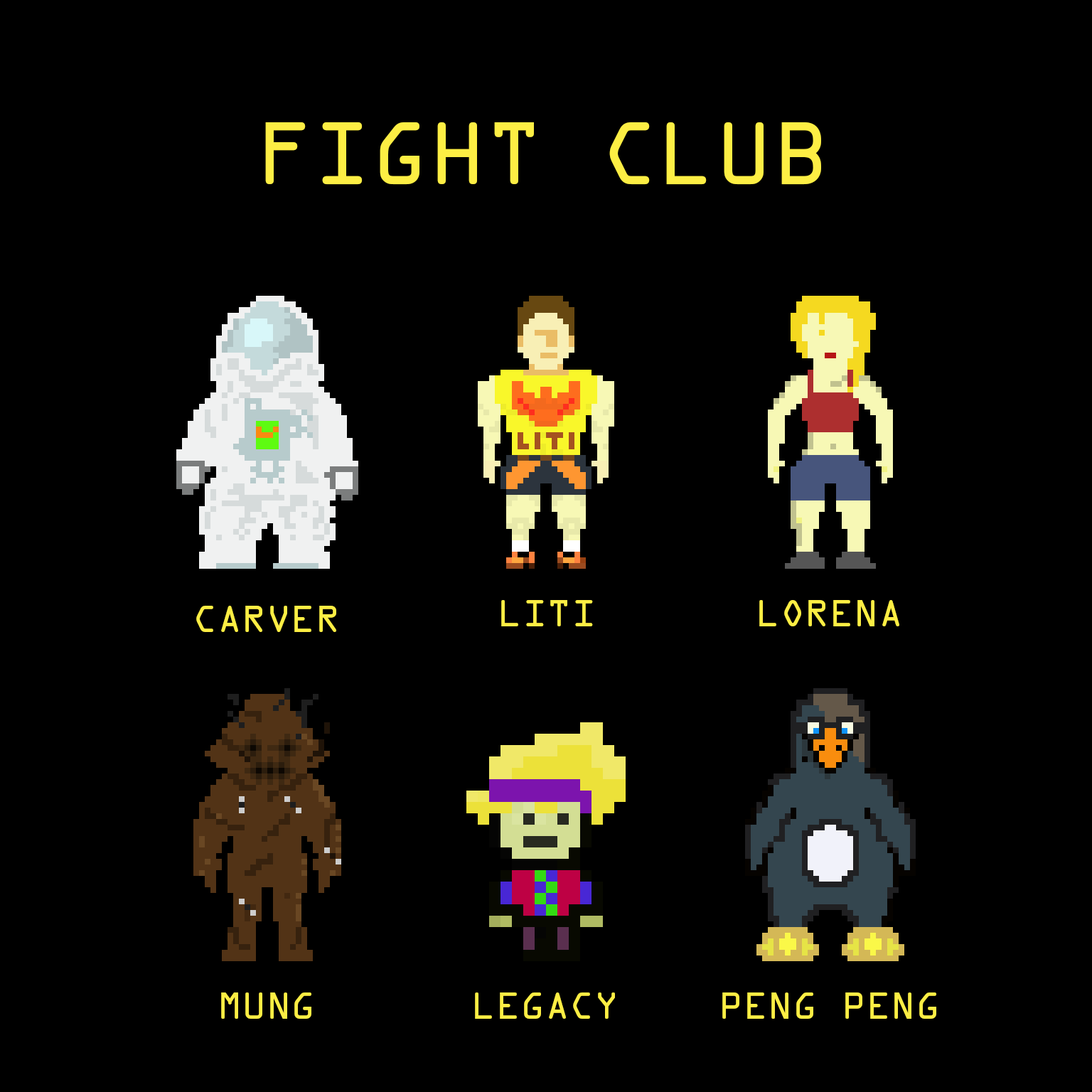
<style>
.page{position:relative;width:1092px;height:1092px;background:#000000}
.page>*{position:absolute;margin:0}
.t1{font:79.6px "OCRAStd";color:#fdee44}
.t2{font:34.1px "OCRAStd";color:#fdee44}
</style>
<div class="page">
<p class="t1" style="left:265px;top:122px;width:556px;height:63px">FIGHT CLUB</p>
<p class="t2" style="left:196px;top:606px;width:140px;height:26px">CARVER</p>
<p class="t2" style="left:501px;top:600px;width:92px;height:26px">LITI</p>
<p class="t2" style="left:759px;top:600px;width:140px;height:26px">LORENA</p>
<p class="t2" style="left:221px;top:992px;width:90px;height:27px">MUNG</p>
<p class="t2" style="left:475px;top:992px;width:140px;height:27px">LEGACY</p>
<p class="t2" style="left:722px;top:992px;width:214px;height:27px">PENG PENG</p>
</div>
